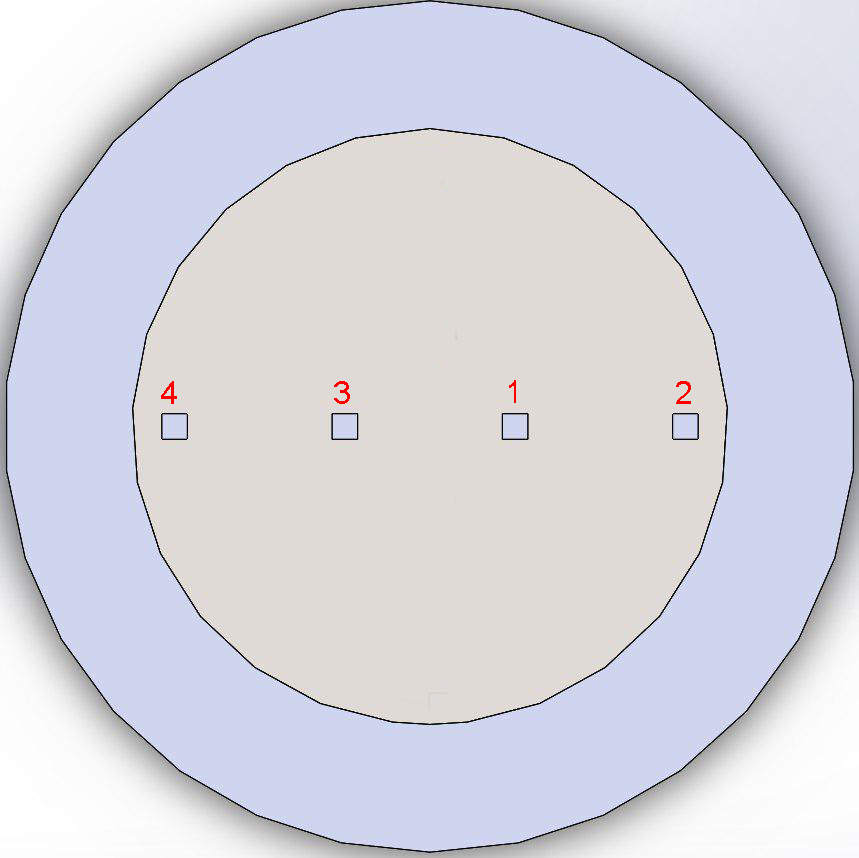
<style>
.page{position:relative;width:859px;height:858px;background:#dfdad6}
.page>*{position:absolute;margin:0}
.t1{font:32px "ArialMT";color:#fe0000}
.t2{font:32px "ArialMT";color:#fe0000;scale:0.78 1}
</style>
<div class="page">
<p class="t1" style="left:161px;top:381px;width:16px;height:23px">4</p>
<p class="t1" style="left:334px;top:381px;width:16px;height:23px">3</p>
<p class="t2" style="left:509px;top:380px;width:7px;height:23px">1</p>
<p class="t1" style="left:676px;top:381px;width:15px;height:23px">2</p>
</div>
